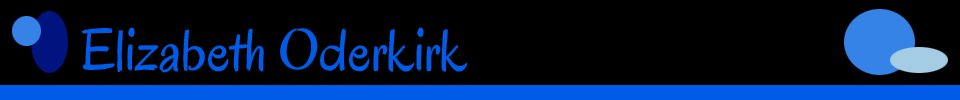
<style>
.page{position:relative;width:960px;height:100px;background:#000000}
.page>*{position:absolute;margin:0}
.t1{font:60px "Oregano-Regular";color:#005ce8}
</style>
<div class="page">
<p class="t1" style="left:81px;top:27px;width:387px;height:46px">Elizabeth Oderkirk</p>
</div>
